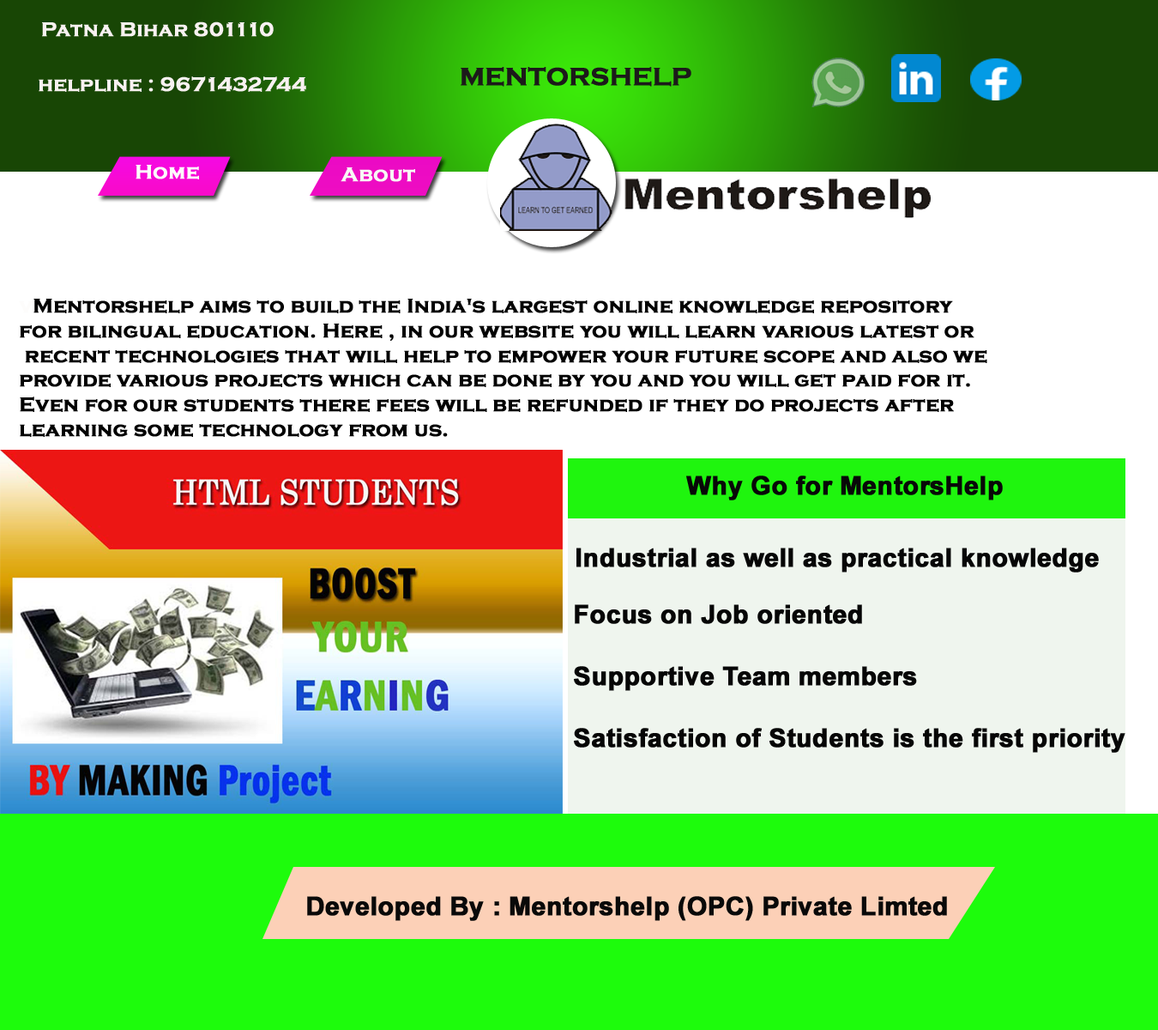
<style>
.page{position:relative;width:1158px;height:1030px;background:#ffffff}
.page>*{position:absolute;margin:0}
.t1{font:20.6px "CopperplateGothic-Bold";color:#f8f1f1;font-weight:bold}
.t2{font:25.7px "CopperplateGothic-Bold";color:#1c1a1a;font-weight:bold}
.t3{font:20.6px "CopperplateGothic-Bold";color:#fdfcfb;font-weight:bold}
.t4{font:20.6px "CopperplateGothic-Bold";color:#f8f7f5;font-weight:bold}
.t5{font:20.6px "CopperplateGothic-Bold";color:#020202;font-weight:bold}
.t6{font:25.7px "Arial-BoldMT";color:#080808;font-weight:bold}
.t7{font:25.7px "Arial-BoldMT";color:#060606;font-weight:bold}
.t8{font:25.7px "Arial-BoldMT";color:#090909;font-weight:bold}
</style>
<div class="page">
<p class="t1" style="left:42px;top:21px;width:232px;height:16px">Patna Bihar 801110</p>
<p class="t1" style="left:39px;top:76px;width:267px;height:16px">helpline : 9671432744</p>
<p class="t2" style="left:461px;top:67px;width:231px;height:20px">MENTORSHELP</p>
<p class="t3" style="left:136px;top:165px;width:63px;height:14px">Home</p>
<p class="t4" style="left:341px;top:167px;width:74px;height:15px">About</p>
<p class="t5" style="left:19px;top:299px;width:968px;height:138px"><span class="t3">v</span>Mentorshelp aims to build the India's largest online knowledge repository <br>for bilingual education. Here , in our website you will learn various latest or<br> recent technologies that will help to empower your future scope and also we <br>provide various projects which can be done by you and you will get paid for it. <br>Even for our students there fees will be refunded if they do projects after <br>learning some technology from us.</p>
<p class="t6" style="left:686px;top:475px;width:317px;height:25px">Why Go for MentorsHelp</p>
<p class="t7" style="left:577px;top:547px;width:522px;height:25px">Industrial as well as practical knowledge</p>
<p class="t7" style="left:574px;top:604px;width:552px;height:148px">Focus on Job oriented<br><br>Supportive Team members<br><br>Satisfaction of Students is the first priority</p>
<p class="t8" style="left:307px;top:896px;width:640px;height:25px">Developed By : Mentorshelp (OPC) Private Limted</p>
</div>
